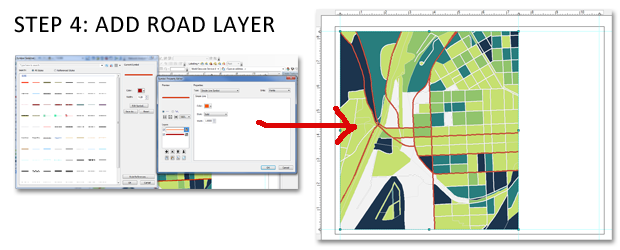
<style>
.page{position:relative;width:620px;height:250px;background:#ffffff}
.page>*{position:absolute;margin:0}
.t1{font:24px "Calibri";letter-spacing:0.025em;color:#000000}
</style>
<div class="page">
<p class="t1" style="left:14px;top:16px;width:261px;height:17px">STEP 4: ADD ROAD LAYER</p>
</div>
